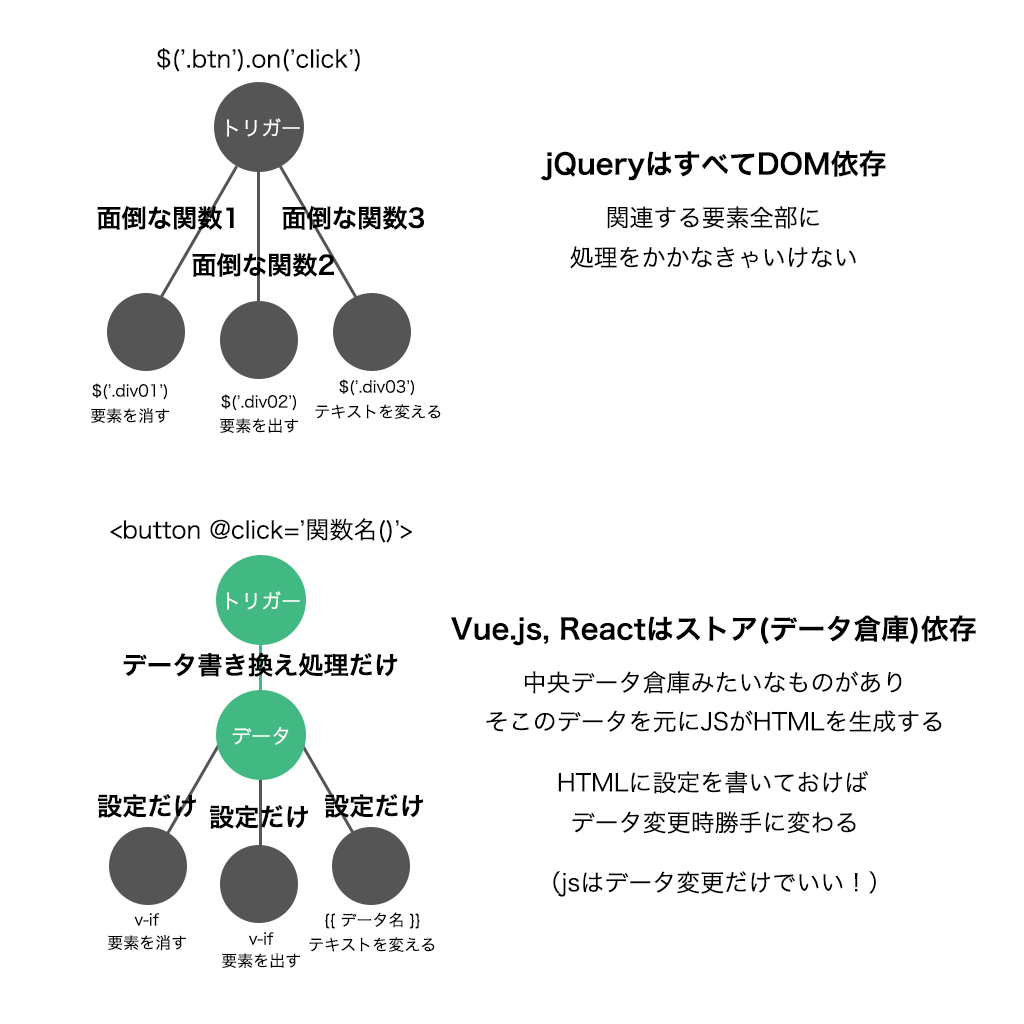
<style>
.page{position:relative;width:1024px;height:1024px;background:#ffffff}
.page>*{position:absolute;margin:0}
.t1{font:24px "HiraKakuPro-W3";color:#000000}
.t2{font:20px "HiraKakuPro-W3";color:#ffffff}
.t3{font:28px "HiraKakuPro-W6";color:#000000}
.t4{font:25.2px "HiraKakuPro-W6";color:#000000}
.t5{font:16px "HiraKakuPro-W3";color:#000000}
</style>
<div class="page">
<p class="t1" style="left:157px;top:48px;width:203px;height:24px">$(’.btn’).on(’click’)</p>
<p class="t2" style="left:227px;top:118px;width:73px;height:19px">トリガー</p>
<p class="t3" style="left:540px;top:150px;width:346px;height:31px">jQueryはすべてDOM依存</p>
<p class="t4" style="left:97px;top:206px;width:137px;height:24px">面倒な関数1</p>
<p class="t4" style="left:282px;top:206px;width:143px;height:24px">面倒な関数3</p>
<p class="t1" style="left:607px;top:206px;width:212px;height:23px">関連する要素全部に</p>
<p class="t1" style="left:570px;top:246px;width:286px;height:23px">処理をかかなきゃいけない</p>
<p class="t4" style="left:192px;top:253px;width:142px;height:24px">面倒な関数2</p>
<p class="t5" style="left:92px;top:383px;width:75px;height:17px">$(’.div01’)</p>
<p class="t5" style="left:339px;top:379px;width:75px;height:17px">$(’.div03’)</p>
<p class="t5" style="left:221px;top:394px;width:75px;height:17px">$(’.div02’)</p>
<p class="t5" style="left:91px;top:408px;width:78px;height:15px">要素を消す</p>
<p class="t5" style="left:315px;top:404px;width:126px;height:15px">テキストを変える</p>
<p class="t5" style="left:220px;top:418px;width:78px;height:15px">要素を出す</p>
<p class="t1" style="left:110px;top:518px;width:302px;height:25px">&lt;button @click=’関数名()’&gt;</p>
<p class="t2" style="left:227px;top:591px;width:73px;height:19px">トリガー</p>
<p class="t3" style="left:451px;top:615px;width:525px;height:31px">Vue.js, Reactはストア(データ倉庫)依存</p>
<p class="t4" style="left:123px;top:653px;width:275px;height:24px">データ書き換え処理だけ</p>
<p class="t1" style="left:525px;top:671px;width:377px;height:23px">中央データ倉庫みたいなものがあり</p>
<p class="t1" style="left:486px;top:710px;width:456px;height:23px">そこのデータを元にJSがHTMLを生成する</p>
<p class="t2" style="left:232px;top:727px;width:57px;height:18px">データ</p>
<p class="t1" style="left:558px;top:771px;width:311px;height:23px">HTMLに設定を書いておけば</p>
<p class="t4" style="left:98px;top:794px;width:98px;height:24px">設定だけ</p>
<p class="t4" style="left:325px;top:794px;width:98px;height:24px">設定だけ</p>
<p class="t4" style="left:210px;top:805px;width:98px;height:24px">設定だけ</p>
<p class="t1" style="left:572px;top:811px;width:284px;height:23px">データ変更時勝手に変わる</p>
<p class="t1" style="left:553px;top:871px;width:323px;height:26px">（jsはデータ変更だけでいい！）</p>
<p class="t5" style="left:134px;top:913px;width:26px;height:13px">v-if</p>
<p class="t5" style="left:325px;top:912px;width:95px;height:17px">{{ データ名 }}</p>
<p class="t5" style="left:108px;top:935px;width:78px;height:15px">要素を消す</p>
<p class="t5" style="left:248px;top:932px;width:26px;height:13px">v-if</p>
<p class="t5" style="left:309px;top:937px;width:126px;height:15px">テキストを変える</p>
<p class="t5" style="left:222px;top:953px;width:78px;height:15px">要素を出す</p>
</div>
